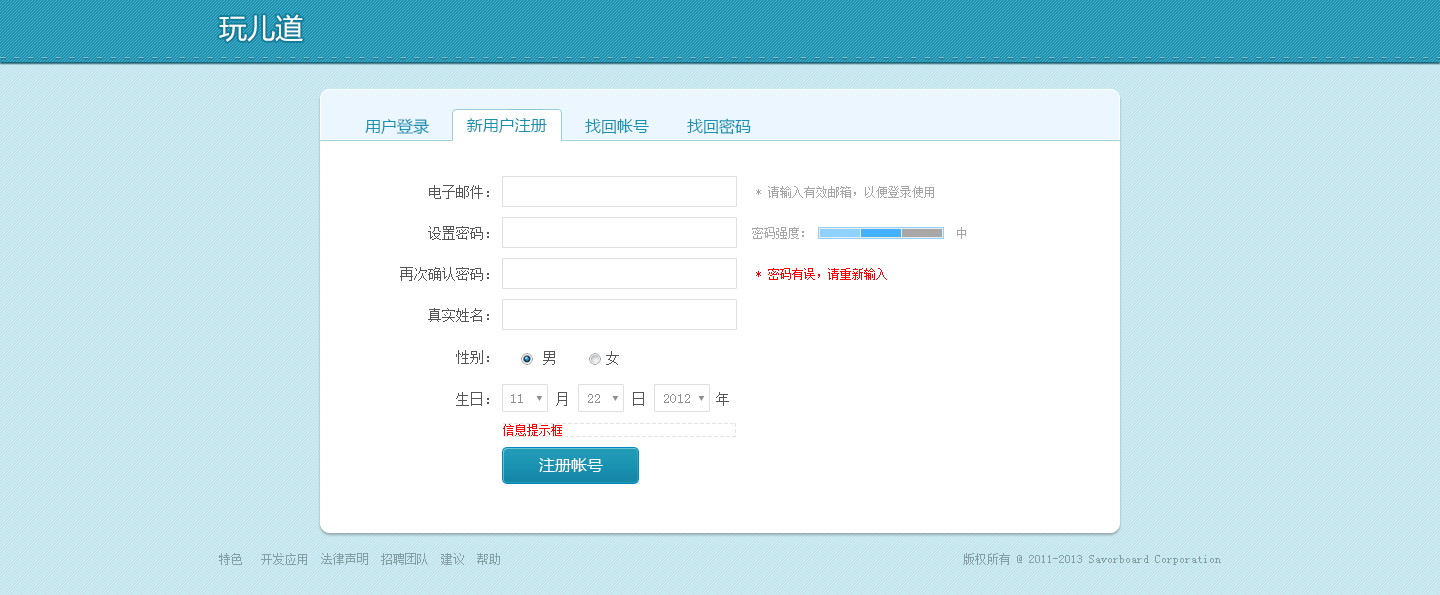
<style>
.page{position:relative;width:1440px;height:595px;background:#ffffff}
.page>*{position:absolute;margin:0}
.t1{font:28px "MicrosoftYaHei";color:#ffffff}
.t2{font:16px "MicrosoftYaHei";color:#1992b1}
.t3{font:14px "SimSun";color:#555555}
.t4{font:12px "SimSun";color:#a5a5a5}
.t5{font:12px "SimSun";color:#ff0000}
.t6{font:14px "SimSun";color:#8e8e8e}
.t7{font:12px "SimSun";color:#ff0101}
.t8{font:16px "MicrosoftYaHei";color:#ffffff}
.t9{font:12px "SimSun";color:#849fa6}
</style>
<div class="page">
<p class="t1" style="left:219px;top:14px;width:84px;height:28px">玩儿道</p>
<p class="t2" style="left:365px;top:118px;width:64px;height:16px">用户登录</p>
<p class="t2" style="left:466px;top:118px;width:81px;height:15px">新用户注册</p>
<p class="t2" style="left:585px;top:119px;width:64px;height:15px">找回帐号</p>
<p class="t2" style="left:687px;top:118px;width:64px;height:17px">找回密码</p>
<p class="t3" style="left:429px;top:185px;width:60px;height:14px">电子邮件：</p>
<p class="t4" style="left:756px;top:186px;width:178px;height:12px">* 请输入有效邮箱，以便登录使用</p>
<p class="t3" style="left:428px;top:226px;width:61px;height:14px">设置密码：</p>
<p class="t4" style="left:752px;top:227px;width:214px;height:12px">密码强度：                        中</p>
<p class="t3" style="left:400px;top:267px;width:89px;height:14px">再次确认密码：</p>
<p class="t5" style="left:756px;top:268px;width:131px;height:12px">* 密码有误，请重新输入</p>
<p class="t3" style="left:428px;top:308px;width:61px;height:14px">真实姓名：</p>
<p class="t3" style="left:456px;top:350px;width:33px;height:14px">性别：</p>
<p class="t3" style="left:543px;top:351px;width:76px;height:14px">男       女</p>
<p class="t3" style="left:456px;top:392px;width:33px;height:14px">生日：</p>
<p class="t6" style="left:511px;top:394px;width:12px;height:9px">11</p>
<p class="t3" style="left:556px;top:392px;width:173px;height:14px">月         日          年</p>
<p class="t6" style="left:588px;top:394px;width:12px;height:9px">22</p>
<p class="t6" style="left:664px;top:394px;width:26px;height:9px">2012</p>
<p class="t7" style="left:503px;top:424px;width:59px;height:12px">信息提示框</p>
<p class="t8" style="left:539px;top:458px;width:64px;height:14px">注册帐号</p>
<p class="t9" style="left:219px;top:553px;width:281px;height:12px">特色   开发应用  法律声明  招聘团队  建议  帮助</p>
<p class="t9" style="left:963px;top:553px;width:258px;height:12px">版权所有 @ 2011-2013 Savorboard Corporation</p>
</div>
